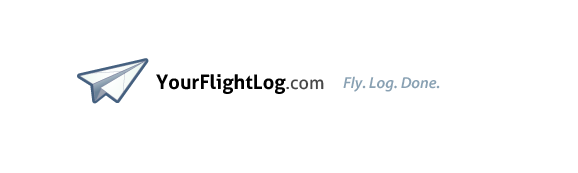
<style>
.page{position:relative;width:578px;height:173px;background:#ffffff}
.page>*{position:absolute;margin:0}
.t1{font:20px "Aller-Bold";color:#000000}
.t2{font:18px "Aller";color:#474747}
.t3{font:16px "MyriadPro-SemiboldIt";color:#89a1b3}
</style>
<div class="page">
<p class="t1" style="left:156px;top:74px;width:168px;height:20px">YourFlightLog<span class="t2">.com</span></p>
<p class="t3" style="left:343px;top:76px;width:97px;height:16px">Fly. Log. Done.</p>
</div>
